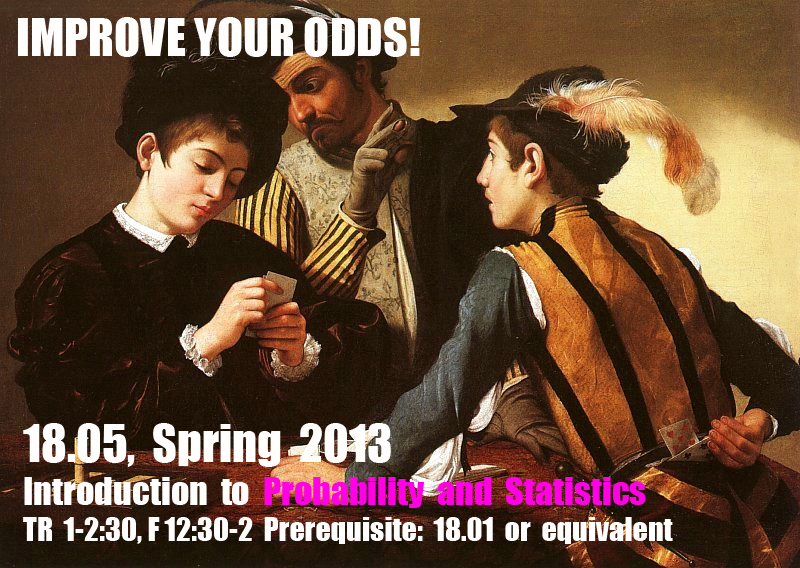
<style>
.page{position:relative;width:800px;height:568px}
.page>*{position:absolute;margin:0}
.t1{font:48px "Impact";color:#fffefd}
.t2{font:30px "Impact";color:#fffefd}
.t3{font:36px "Impact";color:#fffefd}
.t4{font:36px "Impact";color:#ff01e4}
</style>
<div class="page">
<p class="t1" style="left:18px;top:17px;width:403px;height:40px">IMPROVE YOUR ODDS!</p>
<p class="t2" style="left:23px;top:423px;width:650px;height:121px"><span class="t1">18.05,  Spring  2013<br></span><span class="t3">Introduction  to  </span><span class="t4">Probability  and  Statistics<br></span>TR  1-2:30, F 12:30-2  Prerequisite:  18.01  or  equivalent</p>
</div>
